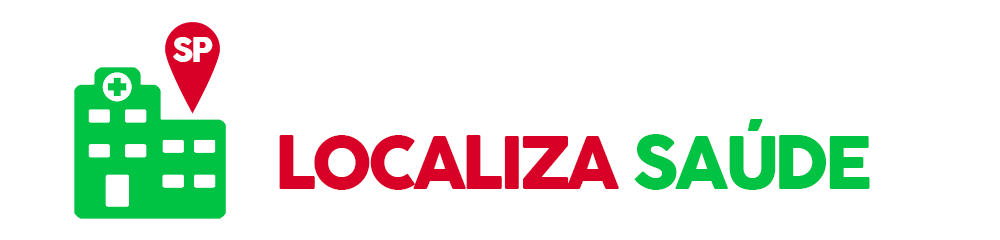
<style>
.page{position:relative;width:1000px;height:240px;background:#ffffff}
.page>*{position:absolute;margin:0}
.t1{font:32.9px "COCOGOOSE";letter-spacing:-0.075em;color:#ffffff;text-transform:uppercase}
.t2{font:72px "COCOGOOSE";letter-spacing:-0.075em;color:#d80027;text-transform:uppercase}
.t3{font:72px "COCOGOOSE";letter-spacing:-0.075em;color:#00c243;text-transform:uppercase}
</style>
<div class="page">
<p class="t1" style="left:173px;top:37px;width:40px;height:25px">SP</p>
<p class="t2" style="left:279px;top:119px;width:591px;height:71px">localizA <span class="t3">saúde</span></p>
</div>
